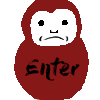
<style>
.page{position:relative;width:100px;height:100px;background:#ffffff}
.page>*{position:absolute;margin:0}
.t1{font:24px "DryBrush";color:#000000}
</style>
<div class="page">
<p class="t1" style="left:25px;top:57px;width:55px;height:24px">Enter</p>
</div>
